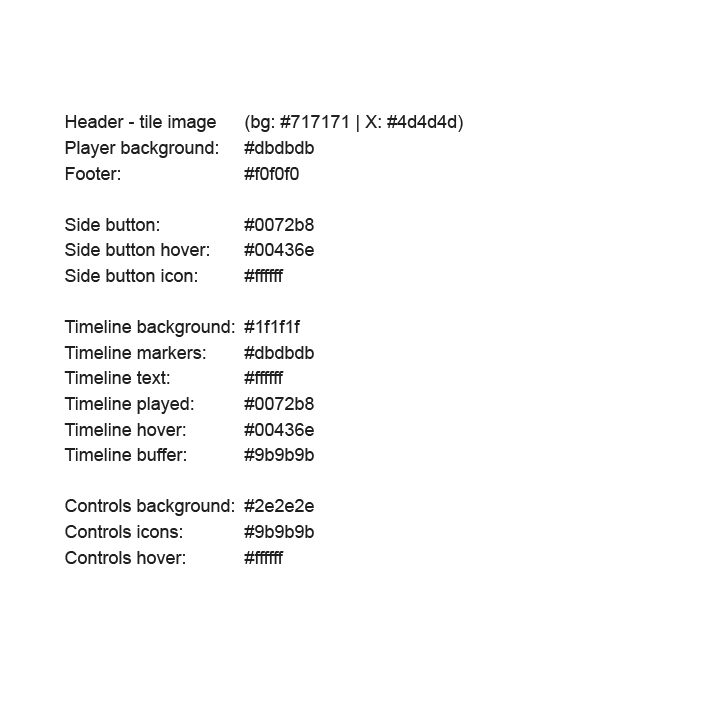
<style>
.page{position:relative;width:709px;height:705px;background:#ffffff}
.page>*{position:absolute;margin:0}
.t1{font:18px/25.6px "ArialMT";color:#1f1f1f}
</style>
<div class="page">
<p class="t1" style="left:64px;top:115px;width:399px;height:449px">Header - tile image  (bg: #717171 | X: #4d4d4d) <br>Player background:  #dbdbdb<br>Footer:     #f0f0f0<br><br>Side button:    #0072b8<br>Side button hover:  #00436e<br>Side button icon:   #ffffff<br><br>Timeline background:  #1f1f1f<br>Timeline markers:  #dbdbdb<br>Timeline text:   #ffffff<br>Timeline played:   #0072b8<br>Timeline hover:   #00436e<br>Timeline buffer:   #9b9b9b<br><br>Controls background:  #2e2e2e<br>Controls icons:   #9b9b9b<br>Controls hover:   #ffffff</p>
</div>
